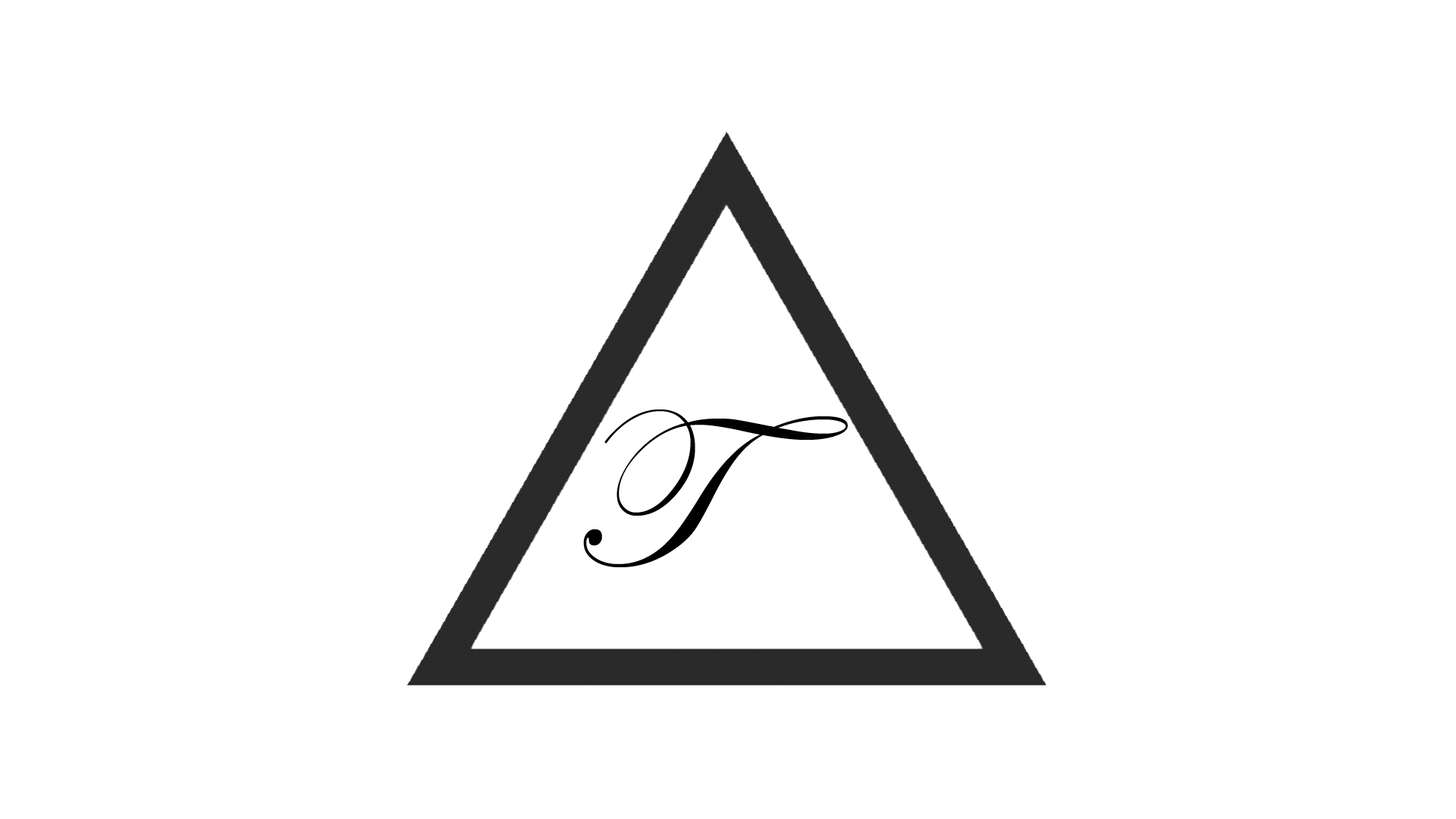
<style>
.page{position:relative;width:1456px;height:819px;background:#ffffff}
.page>*{position:absolute;margin:0}
.t1{font:227.5px "EdwardianScriptITC";color:#000000}
</style>
<div class="page">
<p class="t1" style="left:583px;top:409px;width:265px;height:158px">T</p>
</div>
